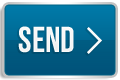
<style>
.page{position:relative;width:120px;height:80px}
.page>*{position:absolute;margin:0}
.t1{font:36px "UTM-Bebas";color:#ffffff}
</style>
<div class="page">
<p class="t1" style="left:18px;top:26px;width:56px;height:27px">send</p>
</div>
